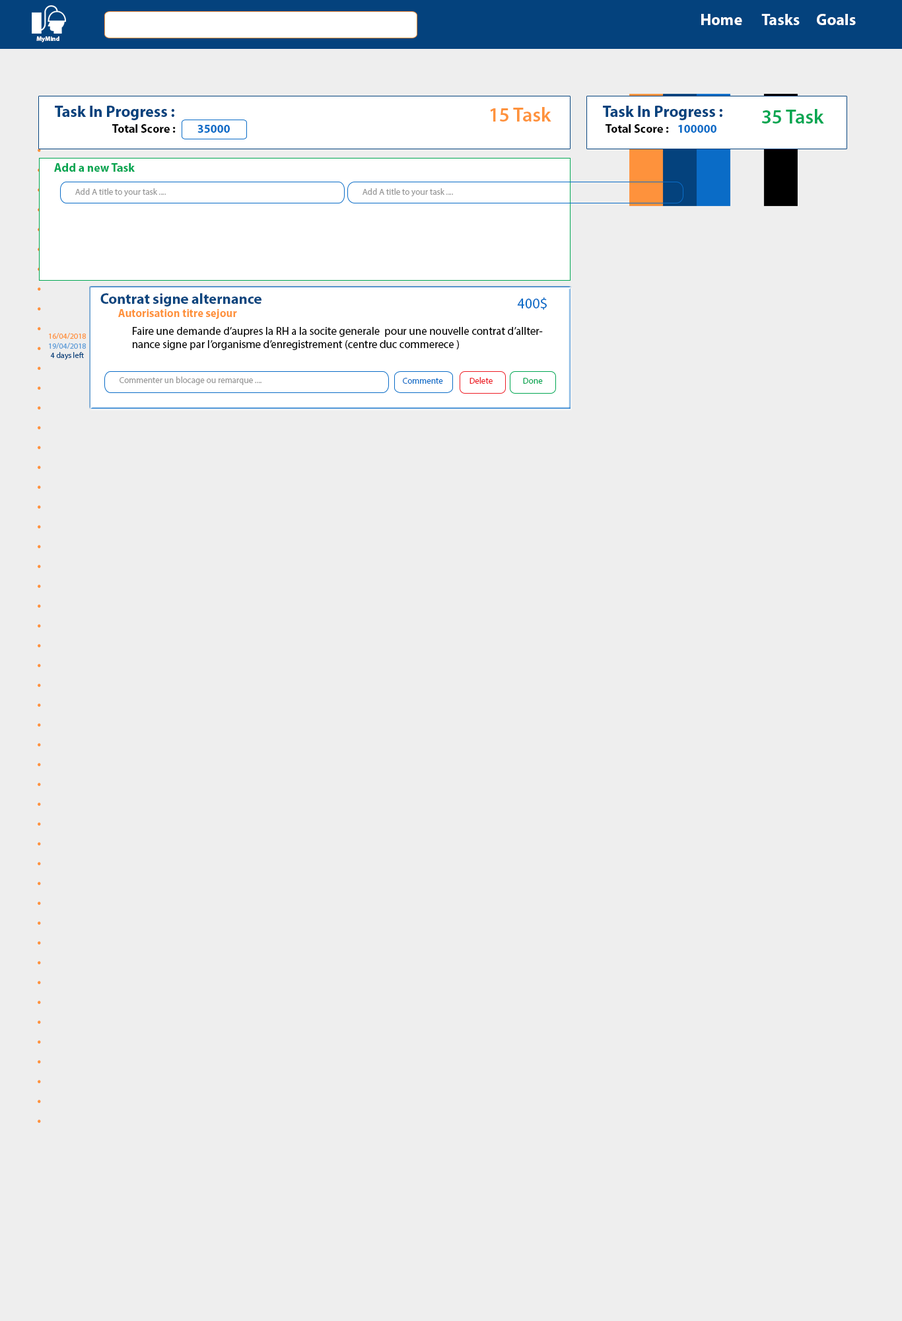
<style>
.page{position:relative;width:902px;height:1321px;background:#eeeeee}
.page>*{position:absolute;margin:0}
.t1{font:15.9px "MyriadPro-Bold";color:#ffffff}
.t2{font:6.2px "MyriadPro-Bold";color:#ffffff}
.t3{font:15.9px "MyriadPro-Bold";color:#04427d}
.t4{font:19.8px "MyriadPro-Semibold";color:#fe923c}
.t5{font:19.8px "MyriadPro-Semibold";color:#00a651}
.t6{font:11.9px "MyriadPro-Bold";color:#000000}
.t7{font:11.9px "MyriadPro-Bold";color:#0a6cc7}
.t8{font:11.9px "MyriadPro-Bold";color:#00a651}
.t9{font:8.7px "MyriadPro-Regular";color:#989898}
.t10{font:14.9px "MyriadPro-Bold";color:#0d467f}
.t11{font:14.9px "MyriadPro-Regular";color:#0a6cc7}
.t12{font:11.2px "MyriadPro-Bold";color:#fe923c}
.t13{font:11.2px "MyriadPro-Regular";color:#000000}
.t14{font:7.9px "MyriadPro-Regular";color:#0d467f}
.t15{font:7.9px "MyriadPro-Regular";color:#fe923c}
.t16{font:7.9px "MyriadPro-Regular";color:#5c9ed9}
.t17{font:8.7px "MyriadPro-Regular";color:#0a6cc7}
.t18{font:8.7px "MyriadPro-Regular";color:#ed1c24}
.t19{font:8.7px "MyriadPro-Regular";color:#00a651}
</style>
<div class="page">
<p class="t1" style="left:702px;top:14px;width:41px;height:11px">Home</p>
<p class="t1" style="left:817px;top:14px;width:39px;height:11px">Goals</p>
<p class="t2" style="left:36px;top:36px;width:23px;height:6px">MyMind</p>
<p class="t3" style="left:55px;top:106px;width:119px;height:14px">Task In Progress :</p>
<p class="t4" style="left:490px;top:107px;width:62px;height:15px">15 Task</p>
<p class="t3" style="left:603px;top:106px;width:120px;height:14px">Task In Progress :</p>
<p class="t5" style="left:762px;top:109px;width:63px;height:15px">35 Task</p>
<p class="t6" style="left:112px;top:124px;width:64px;height:9px">Total Score :</p>
<p class="t7" style="left:198px;top:125px;width:32px;height:8px">35000</p>
<p class="t6" style="left:606px;top:124px;width:63px;height:9px">Total Score :</p>
<p class="t7" style="left:678px;top:125px;width:39px;height:8px">100000</p>
<p class="t4" style="left:38px;top:149px;width:3px;height:974px">..................................................</p>
<p class="t8" style="left:54px;top:163px;width:81px;height:9px">Add a new Task</p>
<p class="t9" style="left:75px;top:188px;width:91px;height:9px">Add A title to your task ....</p>
<p class="t9" style="left:363px;top:188px;width:90px;height:9px">Add A title to your task ....</p>
<p class="t10" style="left:100px;top:293px;width:162px;height:14px">Contrat signe alternance</p>
<p class="t11" style="left:517px;top:297px;width:30px;height:13px">400$</p>
<p class="t12" style="left:118px;top:309px;width:119px;height:10px">Autorisation titre sejour</p>
<p class="t13" style="left:133px;top:327px;width:410px;height:23px">Faire une demande d’aupres la RH a la socite generale  pour une nouvelle contrat d’allternance signe par l’organisme d’enregistrement (centre duc commerece )</p>
<p class="t14" style="left:49px;top:333px;width:37px;height:27px;text-align:center"><span class="t15">16/04/2018<br></span><span class="t16">19/04/2018<br></span>4 days left</p>
<p class="t9" style="left:120px;top:377px;width:142px;height:8px">Commenter un blocage ou remarque ....</p>
<p class="t17" style="left:403px;top:378px;width:40px;height:6px">Commente</p>
<p class="t18" style="left:470px;top:377px;width:23px;height:7px">Delete</p>
<p class="t19" style="left:523px;top:378px;width:20px;height:6px">Done</p>
</div>
